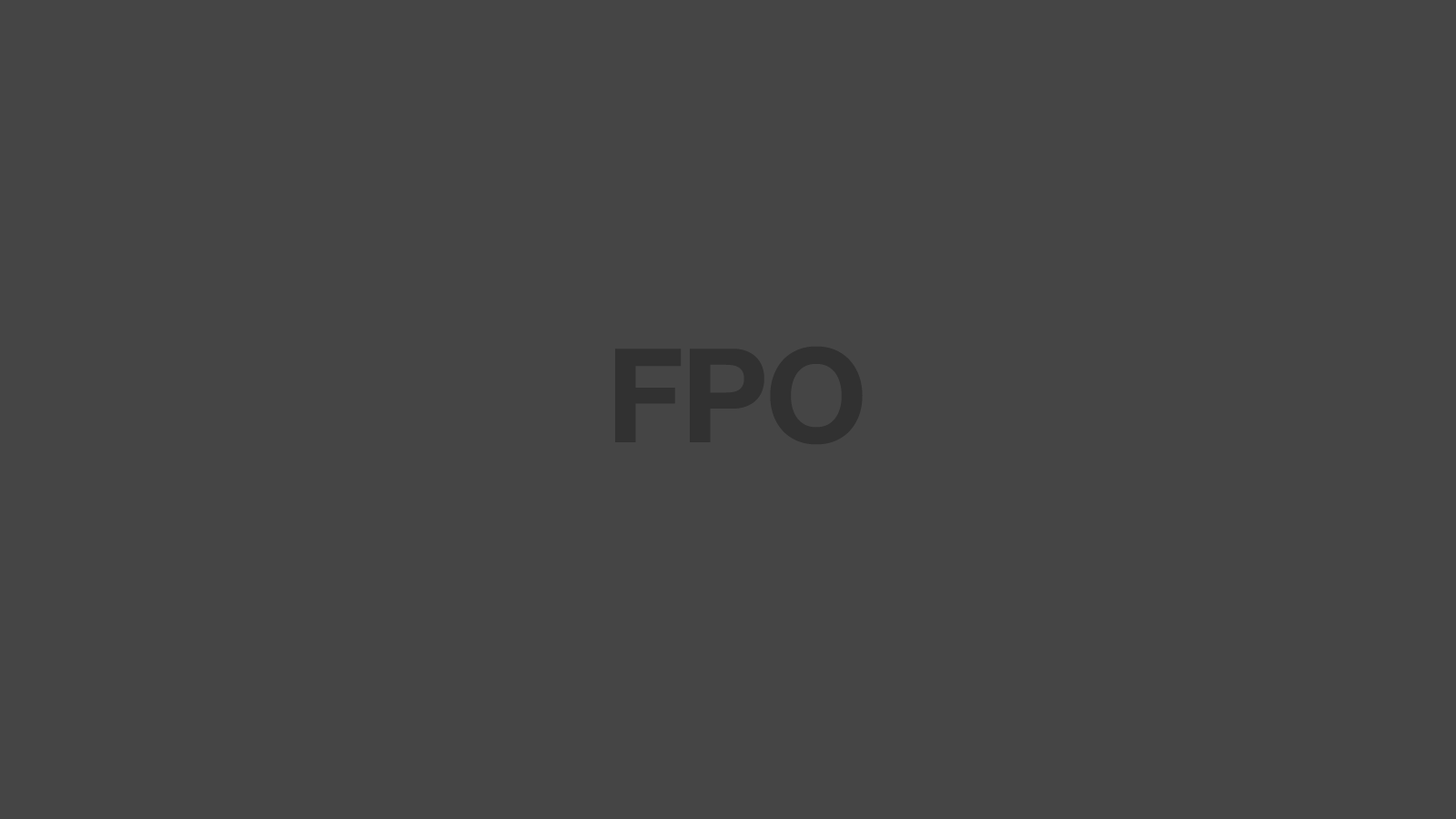
<style>
.page{position:relative;width:1456px;height:819px;background:#454545}
.page>*{position:absolute;margin:0}
.t1{font:131px "HelveticaNeue-Bold";letter-spacing:-0.02em;color:#313131}
</style>
<div class="page">
<p class="t1" style="left:615px;top:346px;width:248px;height:99px">FPO</p>
</div>
